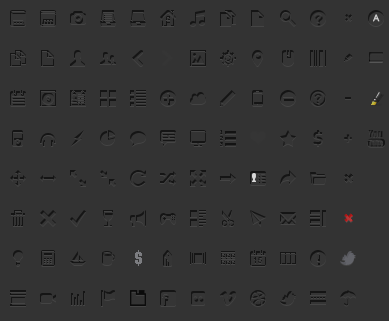
<style>
.page{position:relative;width:389px;height:321px;background:#333333}
.page>*{position:absolute;margin:0}
.t1{font:9px "OpenSans";letter-spacing:0.06em;color:#d6d6d6;font-weight:bold;scale:1.06 1}
</style>
<div class="page">
<p class="t1" style="left:373px;top:14px;width:7px;height:8px">A</p>
</div>
